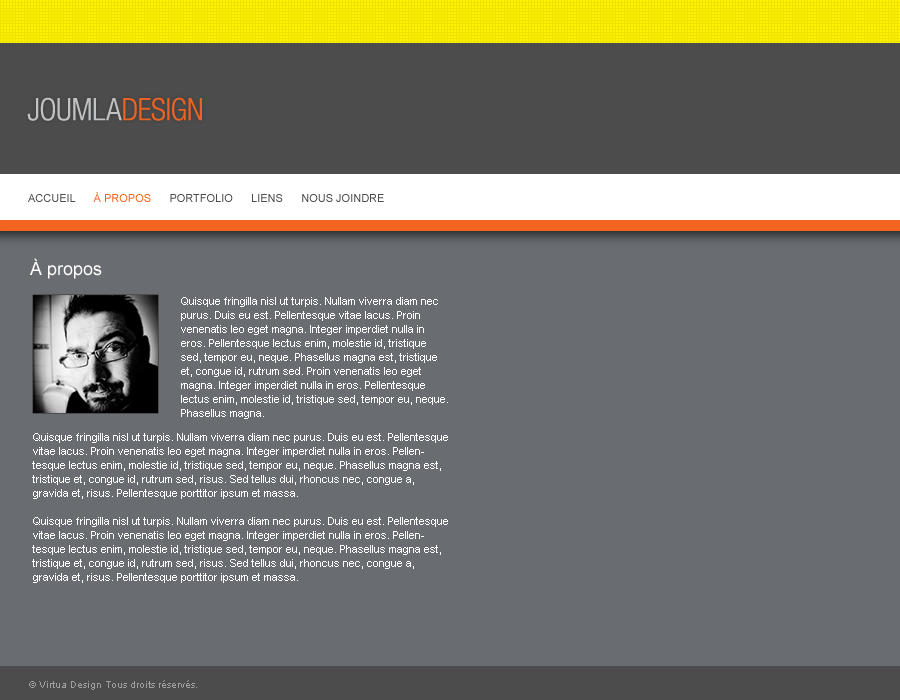
<style>
.page{position:relative;width:900px;height:700px;background:#696d71}
.page>*{position:absolute;margin:0}
.t1{font:11px "ArialMT";color:#4c4c4c;text-transform:uppercase}
.t2{font:11px "ArialMT";color:#f26521;text-transform:uppercase}
.t3{font:18px "ArialMT";color:#ffffff}
.t4{font:11px/14px "ArialMT";color:#ffffff}
.t5{font:10px "ArialMT";color:#a0a0a0}
</style>
<div class="page">
<p class="t1" style="left:28px;top:192px;width:356px;height:10px">accueil      <span class="t2">À propos</span>      portfolio      liens      nous joindre</p>
<p class="t3" style="left:30px;top:258px;width:72px;height:21px">À propos</p>
<p class="t4" style="left:181px;top:297px;width:267px;height:122px">Quisque fringilla nisl ut turpis. Nullam viverra diam nec purus. Duis eu est. Pellentesque vitae lacus. Proin venenatis leo eget magna. Integer imperdiet nulla in eros. Pellentesque lectus enim, molestie id, tristique sed, tempor eu, neque. Phasellus magna est, tristique et, congue id, rutrum sed. Proin venenatis leo eget magna. Integer imperdiet nulla in eros. Pellentesque lectus enim, molestie id, tristique sed, tempor eu, neque. Phasellus magna.</p>
<p class="t4" style="left:32px;top:433px;width:416px;height:150px">Quisque fringilla nisl ut turpis. Nullam viverra diam nec purus. Duis eu est. Pellentesque vitae lacus. Proin venenatis leo eget magna. Integer imperdiet nulla in eros. Pellentesque lectus enim, molestie id, tristique sed, tempor eu, neque. Phasellus magna est, tristique et, congue id, rutrum sed, risus. Sed tellus dui, rhoncus nec, congue a, gravida et, risus. Pellentesque porttitor ipsum et massa.<br><br>Quisque fringilla nisl ut turpis. Nullam viverra diam nec purus. Duis eu est. Pellentesque vitae lacus. Proin venenatis leo eget magna. Integer imperdiet nulla in eros. Pellentesque lectus enim, molestie id, tristique sed, tempor eu, neque. Phasellus magna est, tristique et, congue id, rutrum sed, risus. Sed tellus dui, rhoncus nec, congue a, gravida et, risus. Pellentesque porttitor ipsum et massa.</p>
<p class="t5" style="left:29px;top:680px;width:168px;height:10px">© Virtua Design Tous droits réservés.</p>
</div>
